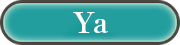
<style>
.page{position:relative;width:180px;height:45px}
.page>*{position:absolute;margin:0}
.t1{font:28px "RyuminPro-ExBold";color:#fdfbf9}
</style>
<div class="page">
<p class="t1" style="left:73px;top:12px;width:35px;height:21px">Ya</p>
</div>
